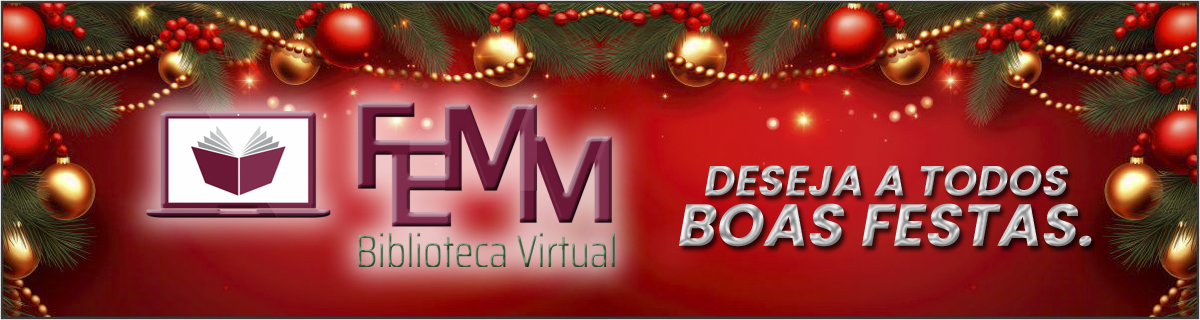
<style>
.page{position:relative;width:1200px;height:320px}
.page>*{position:absolute;margin:0}
.t1{font:41.7px/50px "Poppins-SemiBold";text-transform:uppercase;font-weight:bold;font-style:italic}
.t2{font:58.3px/50px "Poppins-SemiBold";text-transform:uppercase;font-weight:bold;font-style:italic}
</style>
<div class="page">
<p class="t1" style="left:679px;top:165px;width:413px;height:82px;text-align:center">deseja a todos<br><span class="t2">BOAS FESTAS.</span></p>
</div>
